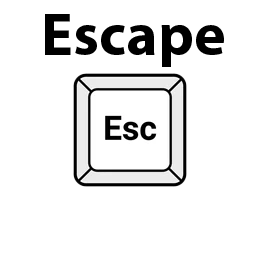
<style>
.page{position:relative;width:260px;height:280px;background:#ffffff}
.page>*{position:absolute;margin:0}
.t1{font:60px "MyriadPro-Bold";color:#000000}
</style>
<div class="page">
<p class="t1" style="left:45px;top:14px;width:179px;height:53px">Escape</p>
</div>
